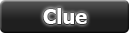
<style>
.page{position:relative;width:129px;height:33px;background:#1f1f1f}
.page>*{position:absolute;margin:0}
.t1{font:20px "Tahoma-Bold";color:#ffffff}
</style>
<div class="page">
<p class="t1" style="left:43px;top:8px;width:44px;height:16px">Clue</p>
</div>
